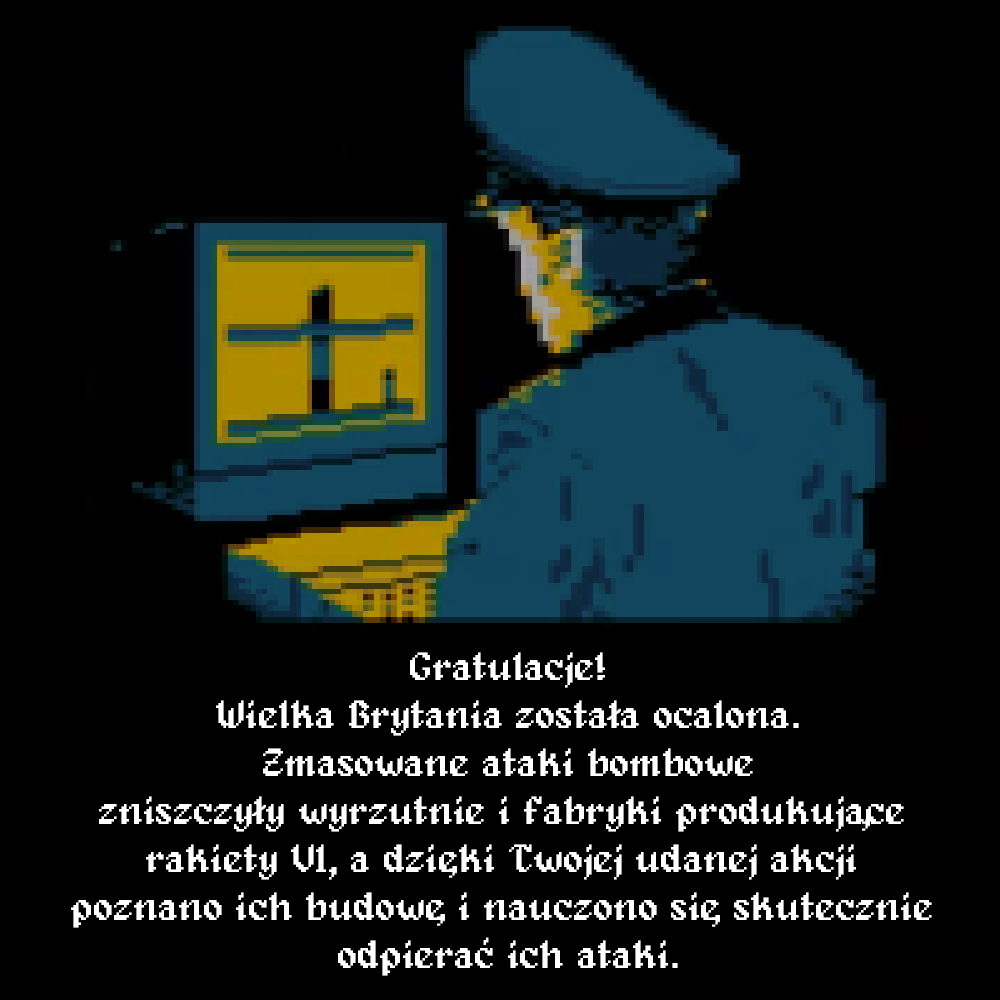
<style>
.page{position:relative;width:1000px;height:1000px;background:#000000}
.page>*{position:absolute;margin:0}
.t1{font:40px "Alagard";color:#ffffff}
</style>
<div class="page">
<p class="t1" style="left:71px;top:652px;width:861px;height:324px;text-align:center">Gratulacje!<br>Wielka Brytania zostala ocalona.<br>Zmasowane ataki bombowe<br>zniszczyly wyrzutnie i fabryki produkujace <br>rakiety V1, a dzieki Twojej udanej akcji <br>poznano ich budowe i nauczono sie skutecznie <br>odpierac ich ataki.</p>
</div>
